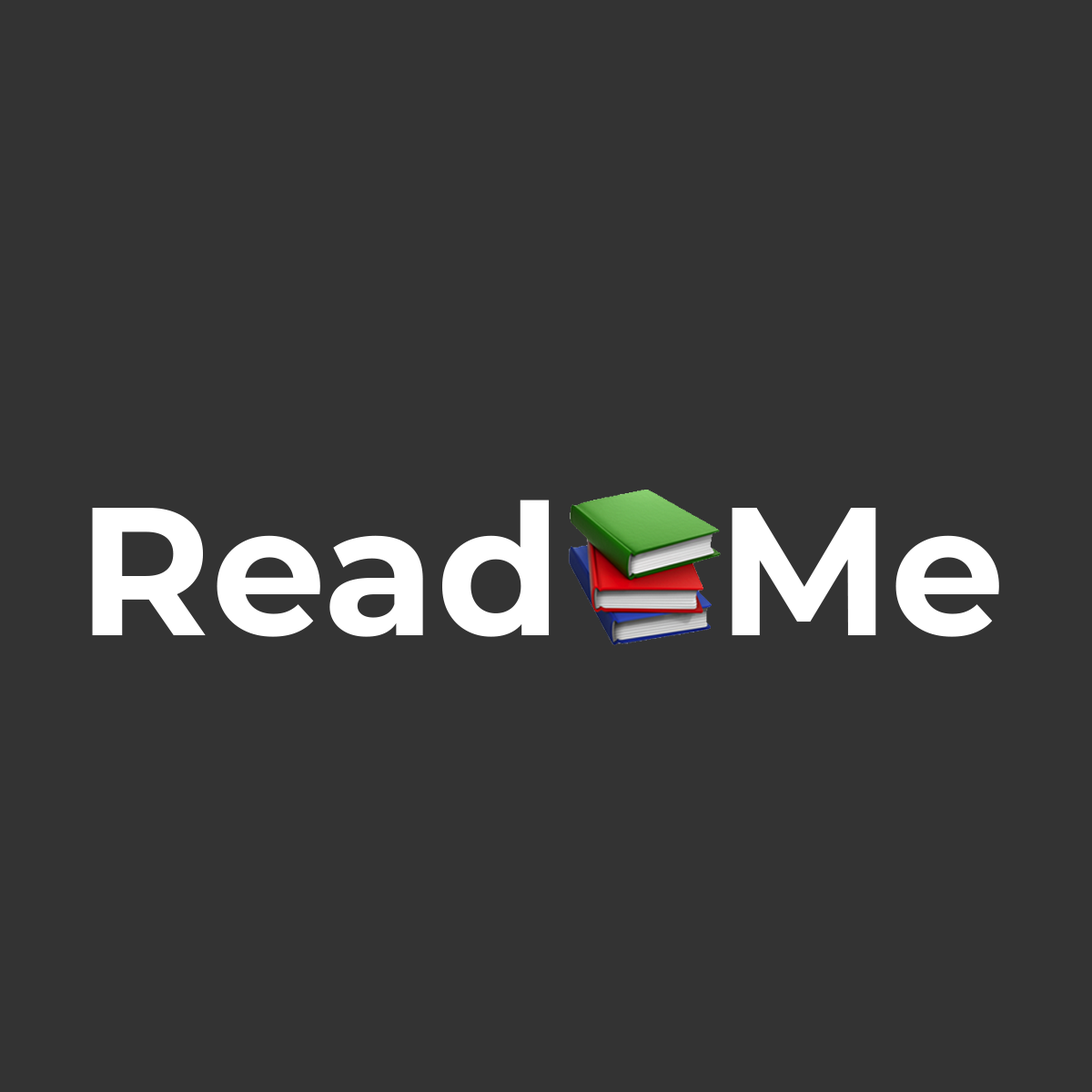
<style>
.page{position:relative;width:1092px;height:1092px;background:#333333}
.page>*{position:absolute;margin:0}
.t1{font:182px "MontserratRoman-Bold";color:#ffffff}
</style>
<div class="page">
<p class="t1" style="left:92px;top:500px;width:907px;height:137px">Read   Me</p>
</div>
